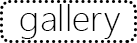
<style>
.page{position:relative;width:137px;height:43px;background:#ffffff}
.page>*{position:absolute;margin:0}
.t1{font:36px "SegoeUI-Light";color:#000000}
</style>
<div class="page">
<p class="t1" style="left:20px;top:4px;width:100px;height:35px">gallery</p>
</div>
